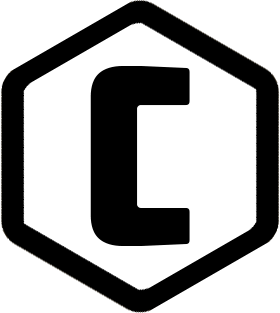
<style>
.page{position:relative;width:280px;height:313px;background:#ffffff}
.page>*{position:absolute;margin:0}
.t1{font:250px "CapricornOSF-Black";color:#000000}
</style>
<div class="page">
<p class="t1" style="left:90px;top:66px;width:100px;height:180px">C</p>
</div>
